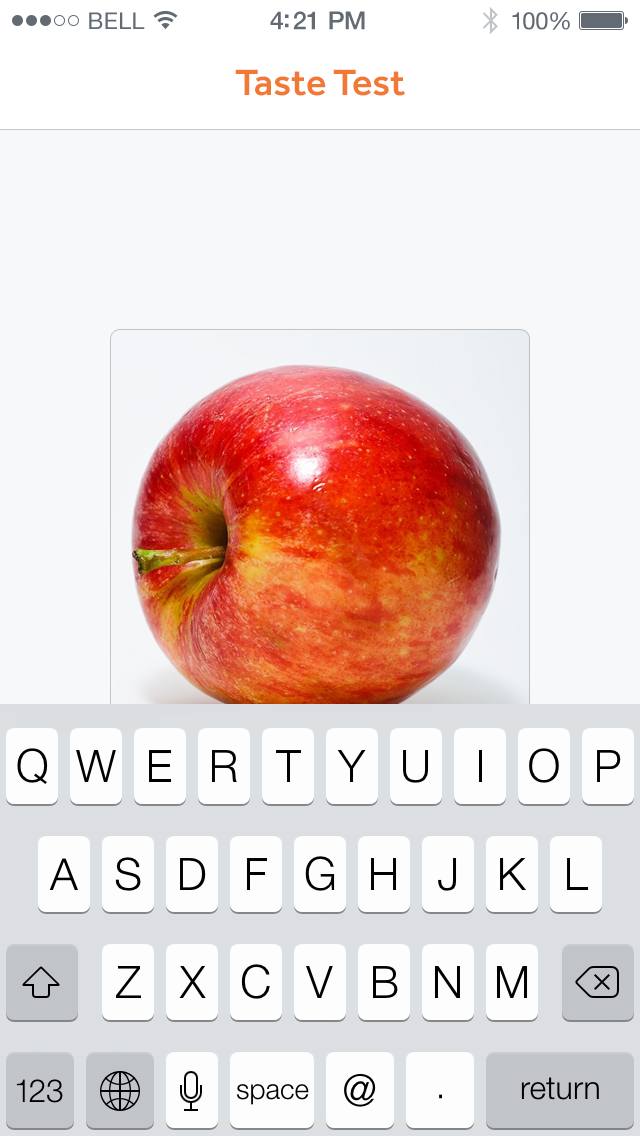
<style>
.page{position:relative;width:640px;height:1136px;background:#f6f8fa}
.page>*{position:absolute;margin:0}
.t1{font:23px "HelveticaNeue";letter-spacing:0.02em;color:#626a73}
.t2{font:25px "HelveticaNeue-Medium";letter-spacing:-0.02em;color:#626a73}
.t3{font:24px "HelveticaNeue";letter-spacing:-0.02em;color:#626a73}
.t4{font:38px "Effra-Medium";color:#f27935}
</style>
<div class="page">
<p class="t1" style="left:89px;top:12px;width:56px;height:17px">BELL</p>
<p class="t2" style="left:270px;top:11px;width:95px;height:19px">4:21 PM</p>
<p class="t3" style="left:512px;top:12px;width:58px;height:18px">100%</p>
<p class="t4" style="left:235px;top:69px;width:170px;height:27px">Taste Test</p>
</div>
